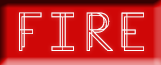
<style>
.page{position:relative;width:161px;height:65px;background:#cf0707}
.page>*{position:absolute;margin:0}
.t1{font:60px "Finity";color:#ffffff}
</style>
<div class="page">
<p class="t1" style="left:19px;top:12px;width:125px;height:39px">FIRE</p>
</div>
